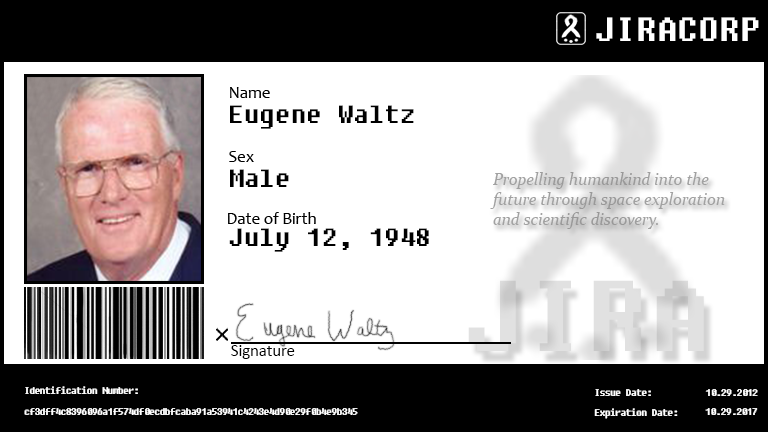
<style>
.page{position:relative;width:768px;height:432px;background:#ffffff}
.page>*{position:absolute;margin:0}
.t1{font:33.3px "Fixedsys";color:#ffffff}
.t2{font:25px "Fixedsys";color:#000000}
.t3{font:16.7px "Constantia-Italic";color:#a1a1a1}
.t4{font:16.7px "Calibri";color:#000000}
.t5{font:8.3px "Fixedsys";color:#ffffff}
</style>
<div class="page">
<p class="t1" style="left:596px;top:17px;width:163px;height:24px">JIRACORP</p>
<p class="t2" style="left:230px;top:105px;width:184px;height:24px">Eugene Waltz</p>
<p class="t2" style="left:230px;top:169px;width:59px;height:18px">Male</p>
<p class="t3" style="left:490px;top:172px;width:235px;height:57px">Propelling humankind into the<br>future through space exploration<br>and scientific discovery.</p>
<p class="t2" style="left:229px;top:228px;width:200px;height:24px">July 12, 1948</p>
<p class="t4" style="left:231px;top:345px;width:64px;height:14px">Signature</p>
<p class="t5" style="left:25px;top:386px;width:113px;height:8px">Identification Number:</p>
<p class="t5" style="left:594px;top:389px;width:84px;height:30px">Issue Date:<br><br>Expiration Date:</p>
<p class="t5" style="left:705px;top:389px;width:53px;height:7px">10.29.2012</p>
<p class="t5" style="left:24px;top:408px;width:334px;height:7px">cf3dff4c8396096a1f574df0ecdbfcaba91a53941c4243e4d90e29f0b4e9b345</p>
<p class="t5" style="left:705px;top:408px;width:53px;height:7px">10.29.2017</p>
</div>
